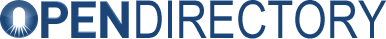
<style>
.page{position:relative;width:386px;height:39px;background:#ffffff}
.page>*{position:absolute;margin:0}
.t1{font:52.5px "ArialNarrow";color:#1b4477}
</style>
<div class="page">
<p class="t1" style="left:136px;top:0px;width:251px;height:39px">DIRECTORY</p>
</div>
